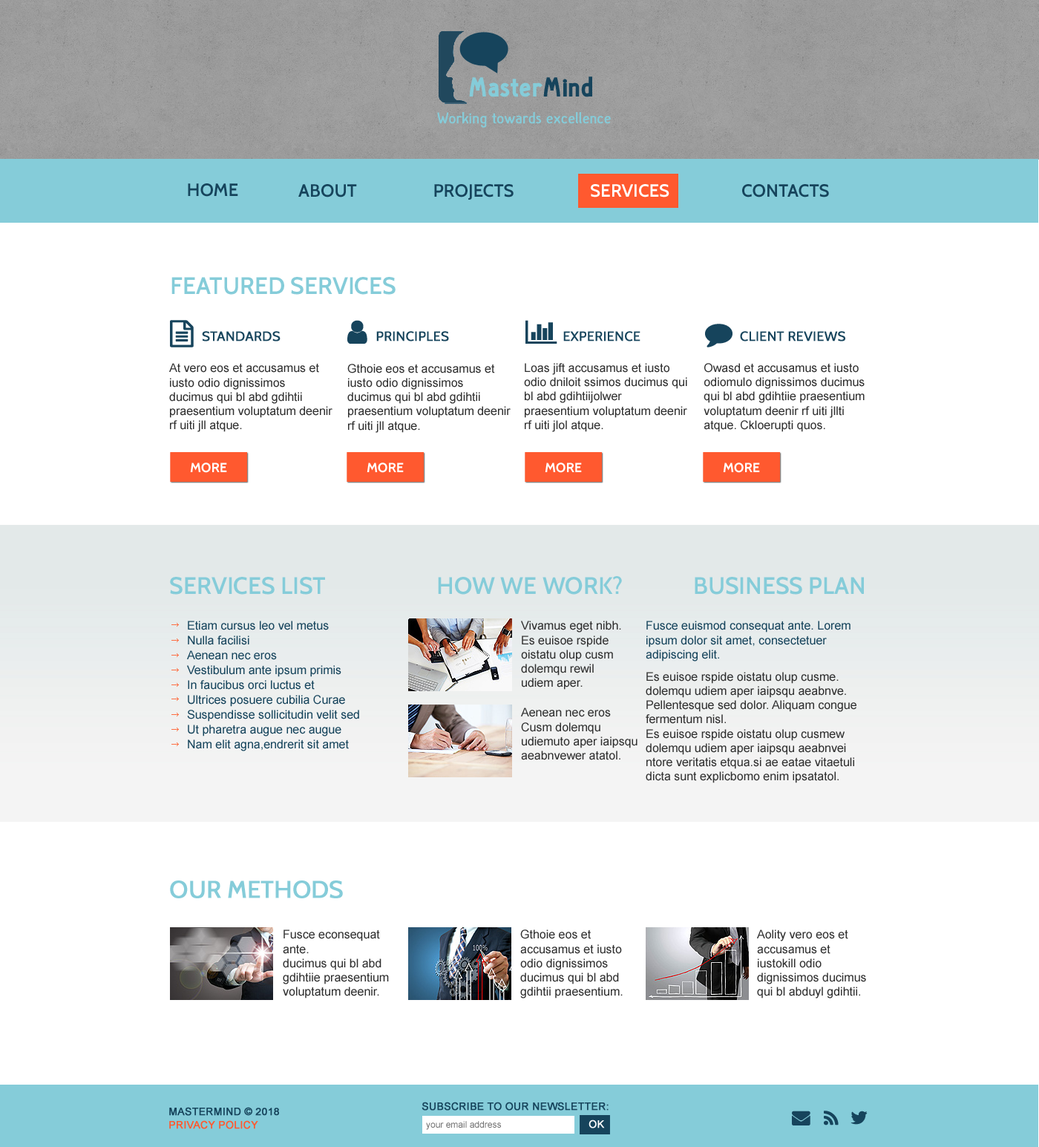
<style>
.page{position:relative;width:1039px;height:1147px;background:#ffffff}
.page>*{position:absolute;margin:0}
.t1{font:17.8px "Cabin-SemiBold";color:#16445c}
.t2{font:17.8px "Cabin-SemiBold";color:#ffffff}
.t3{font:23.8px "Cabin-SemiBold";color:#85ccd9;text-transform:uppercase}
.t4{font:13.4px "Cabin-Regular";color:#16445c;text-transform:uppercase;font-weight:bold}
.t5{font:11.9px "ArialMT";color:#303030}
.t6{font:13.4px "Cabin-Bold";color:#ffffff}
.t7{font:11.9px/14.8px "ArialMT";color:#16445c}
.t8{font:11.9px "ArialMT";color:#16445c}
.t9{font:23.8px "Cabin-Regular";color:#85ccd9;text-transform:uppercase;font-weight:bold}
.t10{font:10.4px/13.4px "ArialMT";color:#16445c;font-weight:bold}
.t11{font:10.4px/13.4px "ArialMT";color:#ff592f;font-weight:bold}
.t12{font:10.4px "ArialMT";color:#16445c;font-weight:bold}
.t13{font:8.9px "ArialMT";color:#6f6f6f}
.t14{font:10.4px "ArialMT";color:#ffffff;font-weight:bold}
</style>
<div class="page">
<p class="t1" style="left:188px;top:183px;width:50px;height:14px">HOME</p>
<p class="t1" style="left:298px;top:184px;width:531px;height:16px">ABOUT                   PROJECTS                   <span class="t2">SERVICES                  </span>CONTACTS</p>
<p class="t3" style="left:172px;top:277px;width:224px;height:18px">FEATURED SERVICES</p>
<p class="t4" style="left:202px;top:331px;width:644px;height:11px">standards        PRINCIPLES        EXPERIENCE            CLIENT REVIEWS</p>
<p class="t5" style="left:169px;top:363px;width:164px;height:69px">At vero eos et accusamus et iusto odio dignissimos ducimus qui bl abd gdihtii praesentium voluptatum deenir rf uiti jll atque.</p>
<p class="t5" style="left:347px;top:364px;width:164px;height:69px">Gthoie eos et accusamus et iusto odio dignissimos ducimus qui bl abd gdihtii praesentium voluptatum deenir rf uiti jll atque.</p>
<p class="t5" style="left:524px;top:363px;width:164px;height:69px">Loas jift accusamus et iusto odio dniloit ssimos ducimus qui bl abd gdihtiijolwer praesentium voluptatum deenir rf uiti jlol atque.</p>
<p class="t5" style="left:704px;top:363px;width:161px;height:69px">Owasd et accusamus et iusto odiomulo dignissimos ducimus qui bl abd gdihtiie praesentium voluptatum deenir rf uiti jllti atque. Ckloerupti quos.</p>
<p class="t6" style="left:190px;top:463px;width:37px;height:10px">MORE</p>
<p class="t6" style="left:367px;top:463px;width:37px;height:10px">MORE</p>
<p class="t6" style="left:545px;top:463px;width:37px;height:10px">MORE</p>
<p class="t6" style="left:723px;top:463px;width:37px;height:10px">MORE</p>
<p class="t3" style="left:170px;top:576px;width:694px;height:19px">SERVICES LIST     hOW WE WORK?        BUSINESS PLAN</p>
<p class="t7" style="left:187px;top:621px;width:172px;height:130px">Etiam cursus leo vel metus<br>Nulla facilisi<br>Aenean nec eros<br>Vestibulum ante ipsum primis<br>In faucibus orci luctus et<br>Ultrices posuere cubilia Curae<br>Suspendisse sollicitudin velit sed<br>Ut pharetra augue nec augue<br>Nam elit agna,endrerit sit amet</p>
<p class="t5" style="left:521px;top:621px;width:100px;height:69px">Vivamus eget nibh. Es euisoe rspide oistatu olup cusm dolemqu rewil udiem aper.</p>
<p class="t8" style="left:646px;top:621px;width:205px;height:41px">Fusce euismod consequat ante. Lorem ipsum dolor sit amet, consectetuer adipiscing elit.</p>
<p class="t5" style="left:646px;top:672px;width:211px;height:111px">Es euisoe rspide oistatu olup cusme. dolemqu udiem aper iaipsqu aeabnve.<br>Pellentesque sed dolor. Aliquam congue fermentum nisl.<br>Es euisoe rspide oistatu olup cusmew dolemqu udiem aper iaipsqu aeabnvei ntore veritatis etqua.si ae eatae vitaetuli dicta sunt explicbomo enim ipsatatol.</p>
<p class="t5" style="left:521px;top:708px;width:117px;height:52px">Aenean nec eros<br>Cusm dolemqu udiemuto aper iaipsqu aeabnvewer atatol.</p>
<p class="t9" style="left:170px;top:881px;width:173px;height:17px">OUR METHODS</p>
<p class="t5" style="left:283px;top:930px;width:106px;height:69px">Fusce econsequat ante.<br>ducimus qui bl abd gdihtiie praesentium voluptatum deenir.</p>
<p class="t5" style="left:520px;top:930px;width:103px;height:69px">Gthoie eos et accusamus et iusto odio dignissimos ducimus qui bl abd gdihtii praesentium.</p>
<p class="t5" style="left:757px;top:930px;width:109px;height:69px">Aolity vero eos et accusamus et iustokill odio dignissimos ducimus qui bl abduyl gdihtii.</p>
<p class="t10" style="left:169px;top:1107px;width:110px;height:22px">MASTERMIND © 2018<br><span class="t11">PRIVACY POLICY</span></p>
<p class="t12" style="left:422px;top:1102px;width:187px;height:9px">SUBSCRIBE TO OUR NEWSLETTER:</p>
<p class="t13" style="left:426px;top:1121px;width:75px;height:9px">your email address</p>
<p class="t14" style="left:589px;top:1120px;width:16px;height:9px">OK</p>
</div>
